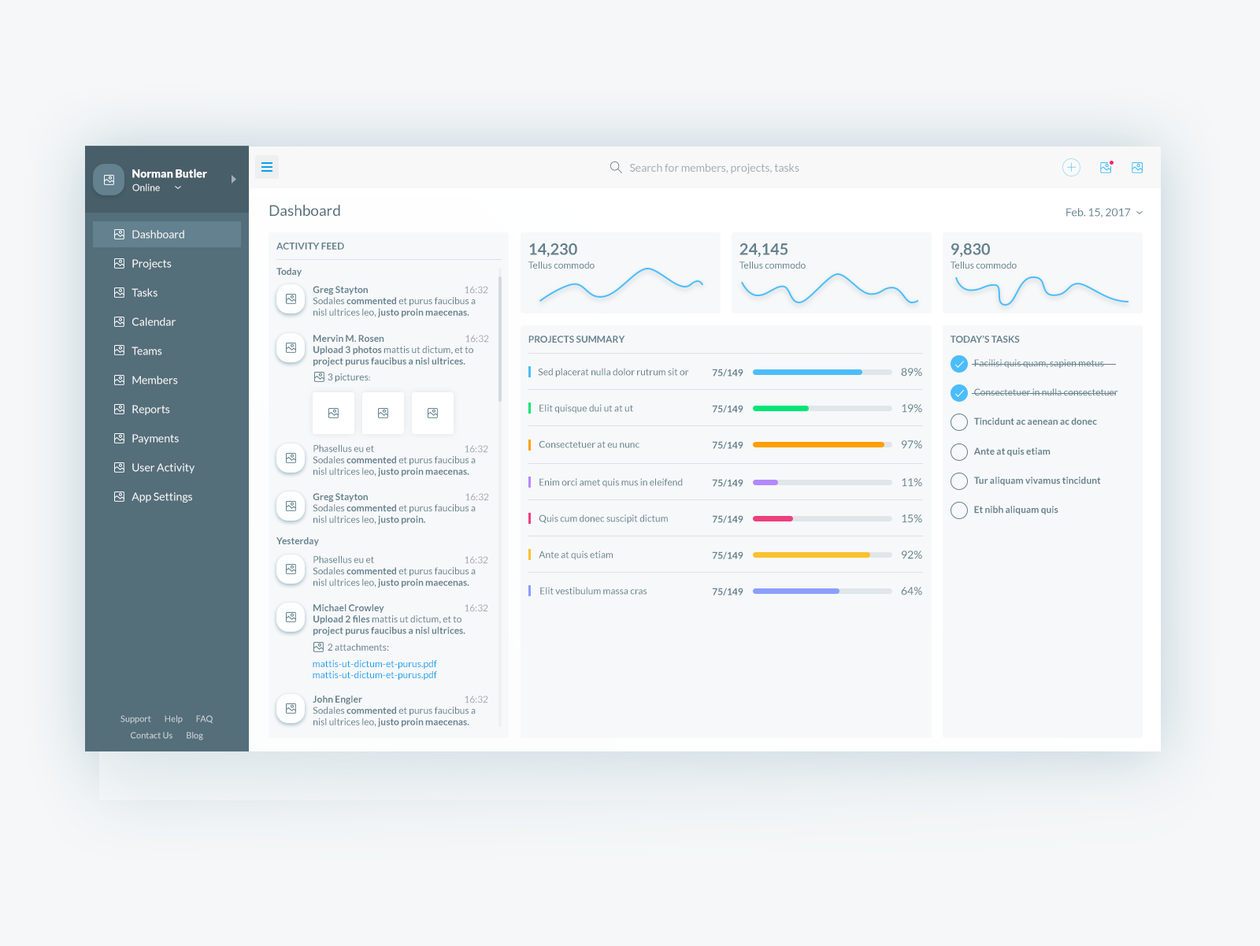
<style>
.page{position:relative;width:1260px;height:946px;background:#f7f8f9}
.page>*{position:absolute;margin:0}
.t1{font:11px "Lato-Black";color:#ffffff}
.t2{font:11px "Lato-Regular";color:#a2adb3}
.t3{font:9.5px "Lato-Regular";color:#ffffff}
.t4{font:15px "Lato-Regular";color:#536c78}
.t5{font:11px "Lato-Regular";color:#63818f}
.t6{font:11px/29.2px "Lato-Regular";color:#f5f5f5}
.t7{font:9.5px "Lato-Bold";color:#63818f;text-transform:uppercase}
.t8{font:15.8px "Lato-Bold";color:#63818f}
.t9{font:9.5px "Lato-Bold";color:#63818f}
.t10{font:9.5px "Lato-Regular";color:#63818f}
.t11{font:9.5px "Lato-Regular";color:#a2adb3}
.t12{font:9.5px "MinionPro-Regular";color:#63818f}
.t13{font:9.5px "Lato-Regular";color:#13a2f0}
.t14{font:8.7px/16.5px "Lato-Regular";color:#ced4d7}
</style>
<div class="page">
<p class="t1" style="left:132px;top:169px;width:75px;height:9px">Norman Butler</p>
<p class="t2" style="left:630px;top:163px;width:170px;height:11px">Search for members, projects, tasks</p>
<p class="t3" style="left:132px;top:184px;width:28px;height:7px;opacity:0.93">Online</p>
<p class="t4" style="left:269px;top:205px;width:71px;height:11px">Dashboard</p>
<p class="t5" style="left:1067px;top:208px;width:64px;height:10px">Feb. 15, 2017</p>
<p class="t6" style="left:132px;top:230px;width:63px;height:273px">Dashboard<br>Projects<br>Tasks<br>Calendar<br>Teams<br>Members<br>Reports<br>Payments<br>User Activity<br>App Settings</p>
<p class="t7" style="left:276px;top:243px;width:68px;height:7px">Activity feed</p>
<p class="t8" style="left:529px;top:243px;width:48px;height:15px">14,230</p>
<p class="t8" style="left:740px;top:243px;width:49px;height:15px">24,145</p>
<p class="t8" style="left:952px;top:243px;width:38px;height:15px">9,830</p>
<p class="t9" style="left:276px;top:268px;width:26px;height:8px">Today</p>
<p class="t10" style="left:529px;top:262px;width:66px;height:7px">Tellus commodo</p>
<p class="t10" style="left:740px;top:262px;width:66px;height:7px">Tellus commodo</p>
<p class="t10" style="left:951px;top:262px;width:66px;height:7px">Tellus commodo</p>
<p class="t10" style="left:313px;top:286px;width:163px;height:31px"><span class="t9">Greg Stayton<br></span>Sodales <span class="t9">commented</span> et purus faucibus a nisl ultrices leo, <span class="t9">justo proin maecenas.</span></p>
<p class="t11" style="left:465px;top:286px;width:23px;height:8px">16:32</p>
<p class="t9" style="left:314px;top:335px;width:159px;height:31px">Mervin M. Rosen<br>Upload 3 photos<span class="t10"> mattis ut dictum, et to </span>project purus faucibus a nisl ultrices.</p>
<p class="t11" style="left:466px;top:335px;width:23px;height:8px">16:32</p>
<p class="t7" style="left:529px;top:336px;width:96px;height:7px">Projects Summary</p>
<p class="t7" style="left:951px;top:335px;width:69px;height:8px">Today’s tasks</p>
<p class="t10" style="left:974px;top:359px;width:130px;height:10px">Facilisi quis quam, sapien metus</p>
<p class="t10" style="left:328px;top:373px;width:42px;height:9px">3 pictures<span class="t12">:</span></p>
<p class="t10" style="left:538px;top:368px;width:151px;height:9px">Sed placerat nulla dolor rutrum sit or</p>
<p class="t9" style="left:712px;top:369px;width:32px;height:8px">75/149</p>
<p class="t5" style="left:901px;top:368px;width:21px;height:9px">89%</p>
<p class="t10" style="left:974px;top:388px;width:145px;height:8px">Consectetuer in nulla consectetuer</p>
<p class="t10" style="left:540px;top:404px;width:93px;height:10px">Elit quisque dui ut at ut</p>
<p class="t9" style="left:712px;top:405px;width:32px;height:8px">75/149</p>
<p class="t5" style="left:902px;top:404px;width:20px;height:9px">19%</p>
<p class="t9" style="left:974px;top:418px;width:123px;height:7px">Tincidunt ac aenean ac donec</p>
<p class="t10" style="left:313px;top:444px;width:163px;height:33px">Phasellus eu et <br>Sodales <span class="t9">commented</span> et purus faucibus a nisl ultrices leo, <span class="t9">justo proin maecenas.</span></p>
<p class="t11" style="left:465px;top:445px;width:23px;height:8px">16:32</p>
<p class="t10" style="left:539px;top:440px;width:101px;height:8px">Consectetuer at eu nunc</p>
<p class="t9" style="left:712px;top:441px;width:32px;height:8px">75/149</p>
<p class="t5" style="left:902px;top:440px;width:20px;height:9px">97%</p>
<p class="t9" style="left:974px;top:447px;width:77px;height:10px">Ante at quis etiam</p>
<p class="t10" style="left:540px;top:478px;width:143px;height:10px">Enim orci amet quis mus in eleifend</p>
<p class="t9" style="left:712px;top:479px;width:32px;height:8px">75/149</p>
<p class="t5" style="left:902px;top:478px;width:20px;height:9px">11%</p>
<p class="t9" style="left:974px;top:477px;width:127px;height:9px">Tur aliquam vivamus tincidunt</p>
<p class="t10" style="left:313px;top:493px;width:163px;height:32px"><span class="t9">Greg Stayton<br></span>Sodales <span class="t9">commented</span> et purus faucibus a nisl ultrices leo, <span class="t9">justo proin.</span></p>
<p class="t11" style="left:466px;top:493px;width:23px;height:8px">16:32</p>
<p class="t9" style="left:974px;top:506px;width:85px;height:9px">Et nibh aliquam quis</p>
<p class="t10" style="left:539px;top:514px;width:129px;height:10px">Quis cum donec suscipit dictum</p>
<p class="t9" style="left:712px;top:515px;width:32px;height:8px">75/149</p>
<p class="t5" style="left:902px;top:514px;width:20px;height:9px">15%</p>
<p class="t9" style="left:276px;top:537px;width:43px;height:9px">Yesterday</p>
<p class="t10" style="left:313px;top:555px;width:163px;height:33px">Phasellus eu et <br>Sodales <span class="t9">commented</span> et purus faucibus a nisl ultrices leo, <span class="t9">justo proin maecenas.</span></p>
<p class="t11" style="left:465px;top:556px;width:23px;height:8px">16:32</p>
<p class="t10" style="left:539px;top:551px;width:74px;height:9px">Ante at quis etiam</p>
<p class="t9" style="left:712px;top:551px;width:32px;height:8px">75/149</p>
<p class="t5" style="left:902px;top:551px;width:20px;height:8px">92%</p>
<p class="t10" style="left:540px;top:587px;width:108px;height:8px">Elit vestibulum massa cras</p>
<p class="t9" style="left:712px;top:588px;width:32px;height:8px">75/149</p>
<p class="t5" style="left:901px;top:587px;width:21px;height:9px">64%</p>
<p class="t9" style="left:314px;top:604px;width:152px;height:32px">Michael Crowley<br>Upload 2 files<span class="t10"> mattis ut dictum, et to </span>project purus faucibus a nisl ultrices.</p>
<p class="t11" style="left:465px;top:604px;width:23px;height:8px">16:32</p>
<p class="t10" style="left:328px;top:644px;width:61px;height:7px">2 attachments:</p>
<p class="t13" style="left:313px;top:660px;width:124px;height:9px">mattis-ut-dictum-et-purus.pdf</p>
<p class="t13" style="left:313px;top:671px;width:124px;height:9px">mattis-ut-dictum-et-purus.pdf</p>
<p class="t10" style="left:313px;top:696px;width:163px;height:31px"><span class="t9">John Engler<br></span>Sodales <span class="t9">commented</span> et purus faucibus a nisl ultrices leo, <span class="t9">justo proin maecenas.</span></p>
<p class="t11" style="left:465px;top:696px;width:23px;height:7px">16:32</p>
<p class="t14" style="left:121px;top:715px;width:92px;height:25px;text-align:center">Support        Help        FAQ<br>Contact Us        Blog</p>
</div>
